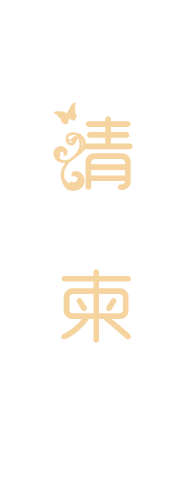
<style>
.page{position:relative;width:193px;height:500px;background:#ffffff}
.page>*{position:absolute;margin:0}
.t1{font:87.5px "STHeitiTC-Medium";color:#f5d49f}
</style>
<div class="page">
<p class="t1" style="left:53px;top:102px;width:80px;height:241px">请<br>柬</p>
</div>
